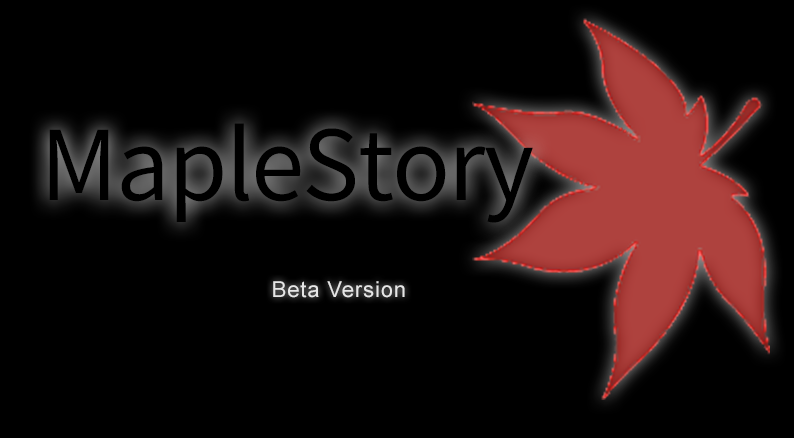
<style>
.page{position:relative;width:794px;height:438px;background:#000000}
.page>*{position:absolute;margin:0}
.t1{font:96px "yyb-Regular";letter-spacing:-0.02em;color:#000000}
.t2{font:22px "ArialMT";letter-spacing:0.04em;color:#e6e6e6}
</style>
<div class="page">
<p class="t1" style="left:49px;top:123px;width:484px;height:100px">MapleStory</p>
<p class="t2" style="left:273px;top:281px;width:132px;height:17px">Beta Version</p>
</div>
